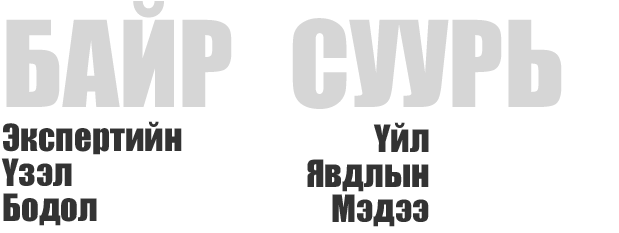
<style>
.page{position:relative;width:619px;height:233px;background:#ffffff}
.page>*{position:absolute;margin:0}
.t1{font:110px "MonImpact";color:#d6d6d6}
.t2{font:34.8px/34.8px "MonImpact";color:#333333}
</style>
<div class="page">
<p class="t1" style="left:6px;top:1px;width:556px;height:108px">БАЙР СУУРЬ</p>
<p class="t2" style="left:1px;top:121px;width:181px;height:105px">Экспертийн<br>Үзэл<br>Бодол</p>
<p class="t2" style="left:307px;top:122px;width:122px;height:105px;text-align:right">Үйл Явдлын Мэдээ</p>
</div>
